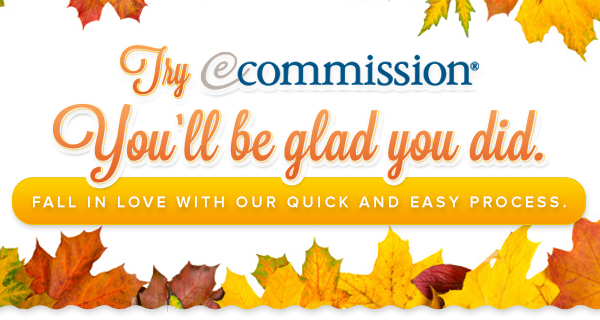
<style>
.page{position:relative;width:600px;height:320px;background:#ffffff}
.page>*{position:absolute;margin:0}
.t1{font:43.9px "Lavanderia-Sturdy"}
.t2{font:63.7px "Lavanderia-Sturdy";color:#e96c30;scale:1.1 1}
.t3{font:63.7px "Lavanderia-Sturdy";scale:1.1 1}
.t4{font:16px "ProximaNova-Semibold";letter-spacing:0.2em;color:#ffffff;text-transform:uppercase}
</style>
<div class="page">
<p class="t1" style="left:120px;top:45px;width:70px;height:53px">Try</p>
<p class="t1" style="left:121px;top:46px;width:70px;height:52px">Try</p>
<p class="t1" style="left:121px;top:46px;width:70px;height:52px">Try</p>
<p class="t2" style="left:53px;top:104px;width:490px;height:79px">You’ll be glad you did.</p>
<p class="t3" style="left:54px;top:104px;width:490px;height:79px">You’ll be glad you did.</p>
<p class="t3" style="left:54px;top:105px;width:490px;height:79px">You’ll be glad you did.</p>
<p class="t4" style="left:33px;top:196px;width:533px;height:12px">Fall in love with our quick and easy process.</p>
</div>
